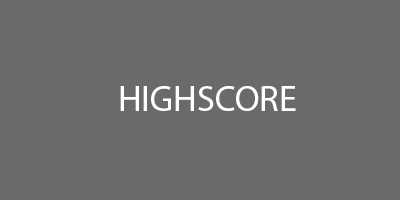
<style>
.page{position:relative;width:400px;height:200px;background:#6a6a6a}
.page>*{position:absolute;margin:0}
.t1{font:36px "MyriadPro-Regular";color:#ffffff}
</style>
<div class="page">
<p class="t1" style="left:120px;top:86px;width:176px;height:25px">HIGHSCORE</p>
</div>
